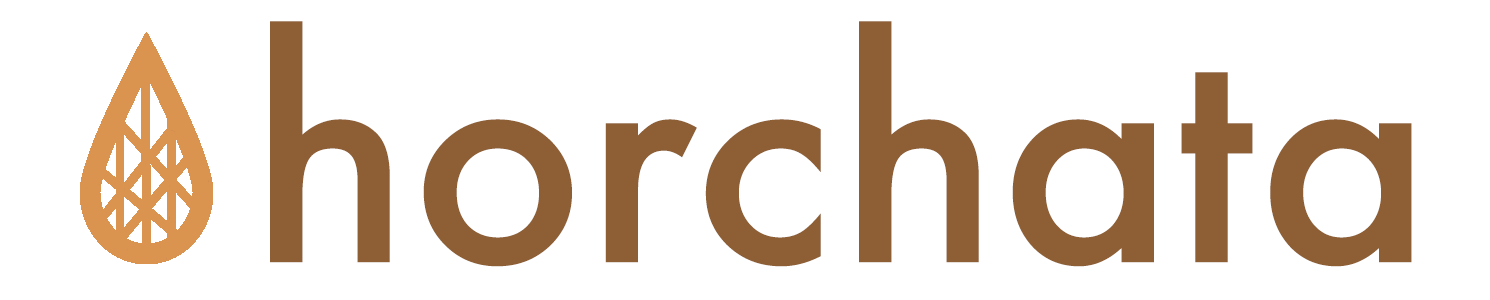
<style>
.page{position:relative;width:1490px;height:300px;background:#ffffff}
.page>*{position:absolute;margin:0}
.t1{font:292px "Futura-Medium";color:#8e5f34}
</style>
<div class="page">
<p class="t1" style="left:270px;top:21px;width:1142px;height:246px">horchata</p>
</div>
